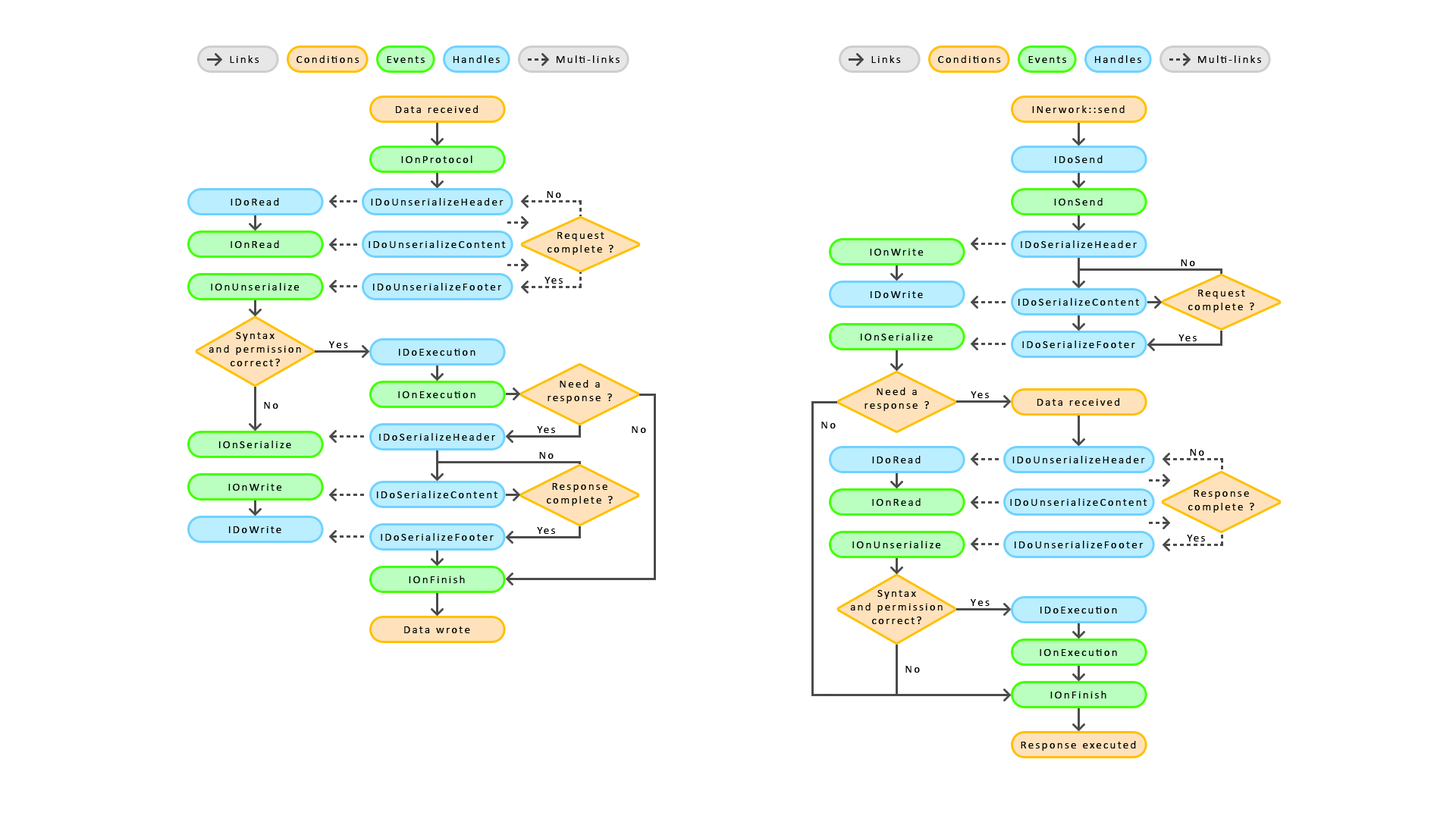
<style>
.page{position:relative;width:1456px;height:819px;background:#ffffff}
.page>*{position:absolute;margin:0}
.t1{font:11.4px "Calibri";letter-spacing:0.15em;color:#000000}
</style>
<div class="page">
<p class="t1" style="left:230px;top:55px;width:29px;height:8px">Links</p>
<p class="t1" style="left:297px;top:55px;width:62px;height:8px">Conditions</p>
<p class="t1" style="left:387px;top:56px;width:38px;height:7px">Events</p>
<p class="t1" style="left:453px;top:55px;width:47px;height:8px">Handles</p>
<p class="t1" style="left:557px;top:55px;width:63px;height:8px">Multi-links</p>
<p class="t1" style="left:871px;top:55px;width:30px;height:8px">Links</p>
<p class="t1" style="left:938px;top:55px;width:63px;height:8px">Conditions</p>
<p class="t1" style="left:1028px;top:56px;width:38px;height:7px">Events</p>
<p class="t1" style="left:1095px;top:55px;width:46px;height:8px">Handles</p>
<p class="t1" style="left:1198px;top:55px;width:63px;height:8px">Multi-links</p>
<p class="t1" style="left:396px;top:105px;width:82px;height:8px">Data received</p>
<p class="t1" style="left:1032px;top:105px;width:93px;height:8px">INerwork::send</p>
<p class="t1" style="left:401px;top:155px;width:71px;height:8px">IOnProtocol</p>
<p class="t1" style="left:1055px;top:155px;width:48px;height:8px">IDoSend</p>
<p class="t1" style="left:231px;top:198px;width:48px;height:8px">IDoRead</p>
<p class="t1" style="left:371px;top:198px;width:133px;height:8px">IDoUnserializeHeader</p>
<p class="t1" style="left:547px;top:191px;width:14px;height:7px">No</p>
<p class="t1" style="left:1054px;top:198px;width:49px;height:8px">IOnSend</p>
<p class="t1" style="left:548px;top:232px;width:65px;height:23px;text-align:center">Request complete ?</p>
<p class="t1" style="left:231px;top:240px;width:48px;height:8px">IOnRead</p>
<p class="t1" style="left:369px;top:240px;width:137px;height:8px">IDoUnserializeContent</p>
<p class="t1" style="left:1021px;top:240px;width:116px;height:8px">IDoSerializeHeader</p>
<p class="t1" style="left:870px;top:249px;width:54px;height:7px">IOnWrite</p>
<p class="t1" style="left:1181px;top:259px;width:14px;height:7px">No</p>
<p class="t1" style="left:544px;top:277px;width:19px;height:7px">Yes</p>
<p class="t1" style="left:211px;top:283px;width:89px;height:7px">IOnUnserialize</p>
<p class="t1" style="left:373px;top:283px;width:129px;height:7px">IDoUnserializeFooter</p>
<p class="t1" style="left:871px;top:291px;width:52px;height:7px">IDoWrite</p>
<p class="t1" style="left:1188px;top:290px;width:66px;height:22px;text-align:center">Request complete ?</p>
<p class="t1" style="left:1018px;top:298px;width:121px;height:8px">IDoSerializeContent</p>
<p class="t1" style="left:209px;top:332px;width:92px;height:34px;text-align:center">Syntax<br>and permission<br>correct?</p>
<p class="t1" style="left:328px;top:341px;width:20px;height:7px">Yes</p>
<p class="t1" style="left:861px;top:333px;width:72px;height:7px">IOnSerialize</p>
<p class="t1" style="left:1022px;top:340px;width:113px;height:8px">IDoSerializeFooter</p>
<p class="t1" style="left:1178px;top:334px;width:19px;height:7px">Yes</p>
<p class="t1" style="left:399px;top:349px;width:76px;height:7px">IDoExecution</p>
<p class="t1" style="left:548px;top:380px;width:64px;height:23px;text-align:center">Need a<br>response ?</p>
<p class="t1" style="left:864px;top:388px;width:65px;height:23px;text-align:center">Need a<br>response ?</p>
<p class="t1" style="left:264px;top:402px;width:14px;height:7px">No</p>
<p class="t1" style="left:398px;top:391px;width:77px;height:7px">IOnExecution</p>
<p class="t1" style="left:971px;top:391px;width:18px;height:7px">Yes</p>
<p class="t1" style="left:1037px;top:398px;width:82px;height:8px">Data received</p>
<p class="t1" style="left:821px;top:422px;width:15px;height:6px">No</p>
<p class="t1" style="left:379px;top:433px;width:116px;height:8px">IDoSerializeHeader</p>
<p class="t1" style="left:537px;top:426px;width:18px;height:7px">Yes</p>
<p class="t1" style="left:632px;top:426px;width:14px;height:7px">No</p>
<p class="t1" style="left:219px;top:441px;width:72px;height:7px">IOnSerialize</p>
<p class="t1" style="left:1190px;top:449px;width:14px;height:7px">No</p>
<p class="t1" style="left:539px;top:452px;width:15px;height:7px">No</p>
<p class="t1" style="left:872px;top:456px;width:49px;height:7px">IDoRead</p>
<p class="t1" style="left:1012px;top:456px;width:133px;height:7px">IDoUnserializeHeader</p>
<p class="t1" style="left:228px;top:484px;width:54px;height:7px">IOnWrite</p>
<p class="t1" style="left:547px;top:483px;width:66px;height:23px;text-align:center">Response complete ?</p>
<p class="t1" style="left:377px;top:491px;width:120px;height:7px">IDoSerializeContent</p>
<p class="t1" style="left:1188px;top:490px;width:66px;height:23px;text-align:center">Response complete ?</p>
<p class="t1" style="left:872px;top:498px;width:49px;height:8px">IOnRead</p>
<p class="t1" style="left:1010px;top:498px;width:137px;height:8px">IDoUnserializeContent</p>
<p class="t1" style="left:229px;top:526px;width:52px;height:7px">IDoWrite</p>
<p class="t1" style="left:381px;top:533px;width:113px;height:8px">IDoSerializeFooter</p>
<p class="t1" style="left:537px;top:527px;width:18px;height:7px">Yes</p>
<p class="t1" style="left:852px;top:541px;width:89px;height:7px">IOnUnserialize</p>
<p class="t1" style="left:1015px;top:541px;width:129px;height:7px">IDoUnserializeFooter</p>
<p class="t1" style="left:1187px;top:535px;width:18px;height:6px">Yes</p>
<p class="t1" style="left:409px;top:576px;width:56px;height:7px">IOnFinish</p>
<p class="t1" style="left:850px;top:590px;width:93px;height:34px;text-align:center">Syntax<br>and permission<br>correct?</p>
<p class="t1" style="left:970px;top:599px;width:20px;height:7px">Yes</p>
<p class="t1" style="left:1040px;top:607px;width:77px;height:6px">IDoExecution</p>
<p class="t1" style="left:404px;top:626px;width:66px;height:7px">Data wrote</p>
<p class="t1" style="left:1040px;top:649px;width:77px;height:7px">IOnExecution</p>
<p class="t1" style="left:905px;top:666px;width:15px;height:7px">No</p>
<p class="t1" style="left:1050px;top:691px;width:56px;height:7px">IOnFinish</p>
<p class="t1" style="left:1021px;top:741px;width:115px;height:10px">Response executed</p>
</div>
